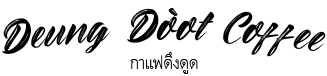
<style>
.page{position:relative;width:327px;height:76px;background:#ffffff}
.page>*{position:absolute;margin:0}
.t1{font:36px "BraydonScript";color:#000000}
.t2{font:24px "DilleniaUPC";color:#000000}
</style>
<div class="page">
<p class="t1" style="left:2px;top:7px;width:324px;height:50px">Deung Dòot Coffee</p>
<p class="t2" style="left:130px;top:52px;width:68px;height:22px">กาแฟดึงดูด</p>
</div>
